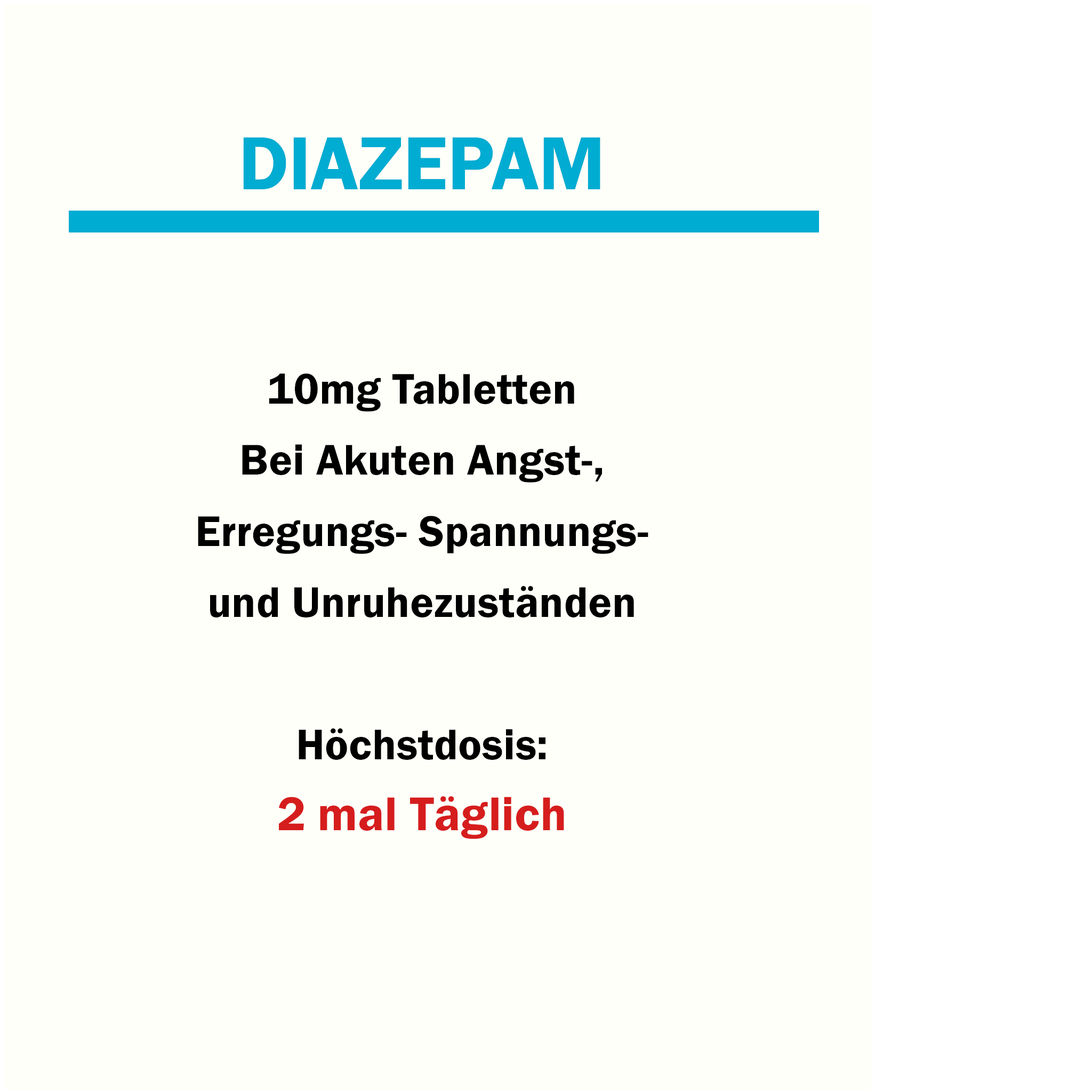
<style>
.page{position:relative;width:1092px;height:1092px;background:#fffff9}
.page>*{position:absolute;margin:0}
.t1{font:77.8px "FranklinGothic-Demi";color:#00acd2}
.t2{font:44.4px/71.1px "FranklinGothic-Demi";letter-spacing:0.005em;color:#000000}
.t3{font:48.9px/71.1px "FranklinGothic-Demi";letter-spacing:0.005em;color:#d61d1d}
</style>
<div class="page">
<p class="t1" style="left:243px;top:137px;width:357px;height:52px">DIAZEPAM</p>
<p class="t2" style="left:198px;top:373px;width:450px;height:466px;text-align:center">10mg Tabletten<br>Bei Akuten Angst-, Erregungs- Spannungs- <br>und Unruhezuständen<br><br>Höchstdosis: <br><span class="t3">2 mal Täglich</span></p>
</div>
